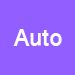
<style>
.page{position:relative;width:75px;height:75px;background:#935eff}
.page>*{position:absolute;margin:0}
.t1{font:25px "MyanmarSangamMN-Bold";color:#fefdff}
</style>
<div class="page">
<p class="t1" style="left:13px;top:29px;width:49px;height:17px">Auto</p>
</div>
